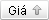
<style>
.page{position:relative;width:49px;height:20px;background:#ffffff}
.page>*{position:absolute;margin:0}
.t1{font:12px "ArialMT";color:#000000}
</style>
<div class="page">
<p class="t1" style="left:9px;top:5px;width:17px;height:10px">Giá</p>
</div>
